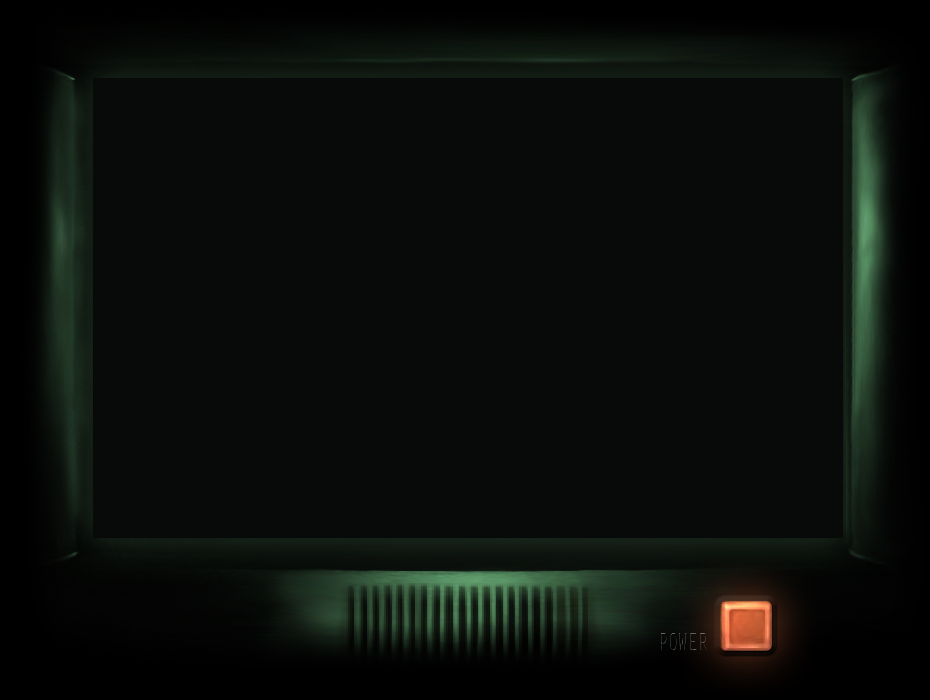
<style>
.page{position:relative;width:930px;height:700px;background:#070a08}
.page>*{position:absolute;margin:0}
.t1{font:23.5px "LetterGothicStd-Bold";scale:0.69 1}
</style>
<div class="page">
<p class="t1" style="left:661px;top:633px;width:47px;height:18px">POWER</p>
</div>
